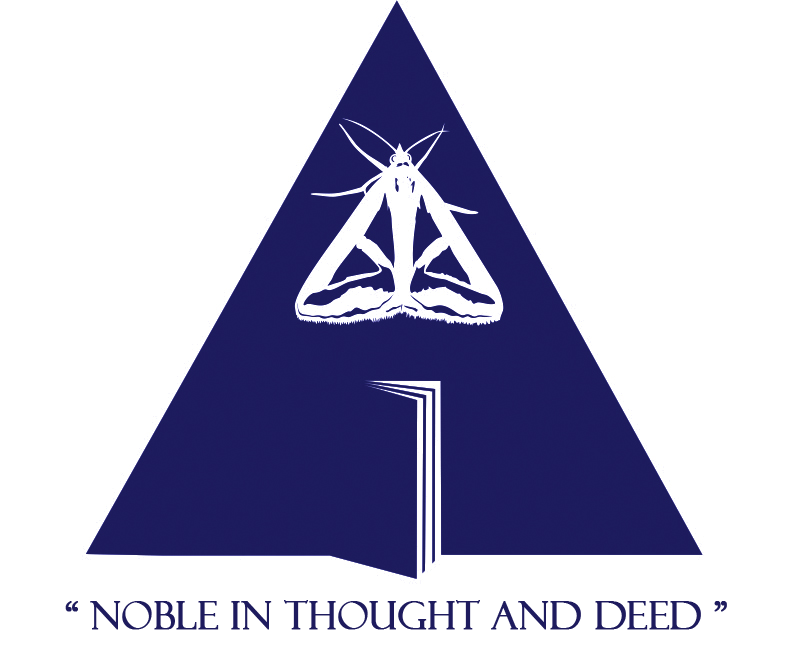
<style>
.page{position:relative;width:792px;height:648px;background:#ffffff}
.page>*{position:absolute;margin:0}
.t1{font:37.5px "FelixTitlingMT";color:#1e1b5e;font-weight:bold}
</style>
<div class="page">
<p class="t1" style="left:65px;top:600px;width:662px;height:30px">“ NOBLE IN THOUGHT AND DEED ”</p>
</div>
